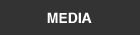
<style>
.page{position:relative;width:140px;height:35px;background:#333333}
.page>*{position:absolute;margin:0}
.t1{font:14px "Helvetica-Bold";color:#ffffff}
</style>
<div class="page">
<p class="t1" style="left:47px;top:12px;width:45px;height:11px">MEDIA</p>
</div>
